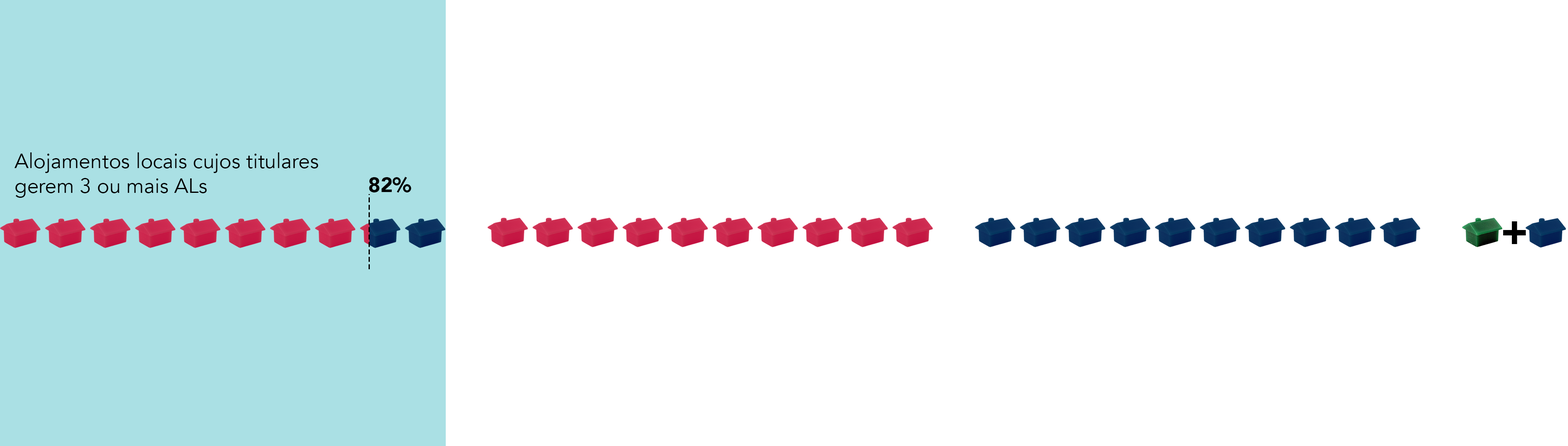
<style>
.page{position:relative;width:1568px;height:446px;background:#ffffff}
.page>*{position:absolute;margin:0}
.t1{font:20.6px "Avenir-Book";color:#000000}
.t2{font:20.6px "Avenir-Black";color:#000000}
.t3{font:41.3px "Avenir-Black";color:#000000}
</style>
<div class="page">
<p class="t1" style="left:14px;top:152px;width:304px;height:46px">Alojamentos locais cujos titulares<br>gerem 3 ou mais ALs</p>
<p class="t2" style="left:369px;top:177px;width:43px;height:16px">82%</p>
<p class="t3" style="left:1503px;top:221px;width:23px;height:23px">+</p>
</div>
